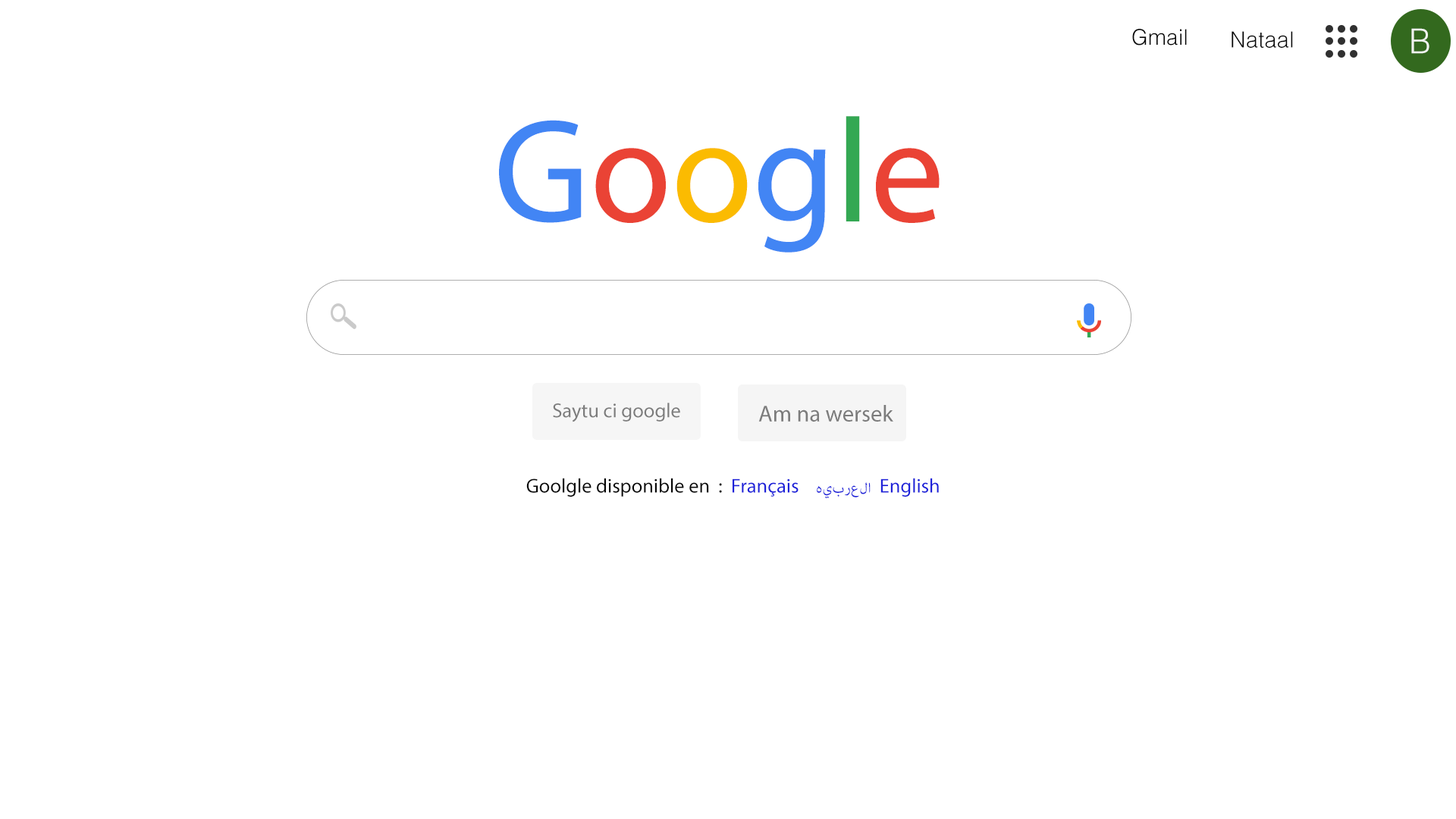
<style>
.page{position:relative;width:1456px;height:819px;background:#ffffff}
.page>*{position:absolute;margin:0}
.t1{font:21.7px "Helvetica-Light";color:#050505}
.t2{font:34.2px "Helvetica-Light";color:#f1f4ef}
.t3{font:22.2px "Helvetica-Light";color:#050505}
.t4{font:148px "MyriadPro-Regular";color:#4285f4}
.t5{font:148px "MyriadPro-Regular";color:#ea4335}
.t6{font:148px "MyriadPro-Regular";color:#fbbb01}
.t7{font:148px "MyriadPro-Regular";color:#34a853}
.t8{font:20.2px "MyriadPro-Regular";color:#7c7c7c}
.t9{font:23.1px "MyriadPro-Regular";color:#7c7c7c}
.t10{font:20.1px "MyriadPro-Regular";color:#070707}
.t11{font:20.1px "MyriadPro-Regular";color:#1d21d9}
.t12{font:20.1px "AdobeArabic-Regular";color:#1d21d9}
</style>
<div class="page">
<p class="t1" style="left:1132px;top:29px;width:55px;height:16px">Gmail</p>
<p class="t2" style="left:1411px;top:28px;width:18px;height:26px">B</p>
<p class="t3" style="left:1232px;top:31px;width:61px;height:17px">Nataal</p>
<p class="t4" style="left:499px;top:116px;width:441px;height:137px">G<span class="t5">o</span><span class="t6">o</span>g<span class="t7">l</span><span class="t5">e</span></p>
<p class="t8" style="left:553px;top:403px;width:127px;height:19px">Saytu ci google</p>
<p class="t9" style="left:758px;top:405px;width:135px;height:17px">Am na wersek</p>
<p class="t10" style="left:526px;top:478px;width:413px;height:21px">Goolgle disponible en  :  <span class="t11">Français    </span><span class="t12">هيبرعلا</span><span class="t11">  English</span></p>
</div>
